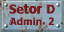
<style>
.page{position:relative;width:64px;height:32px}
.page>*{position:absolute;margin:0}
.t1{font:11px/11px "Calibri-Bold";letter-spacing:0.02em;color:#731818;font-weight:bold}
.t2{font:13.5px/11px "Calibri-Bold";letter-spacing:0.02em;color:#731818;font-weight:bold}
</style>
<div class="page">
<p class="t1" style="left:9px;top:4px;width:46px;height:21px;text-align:center"><span class="t2">Setor D<br></span>Admin. 2</p>
</div>
